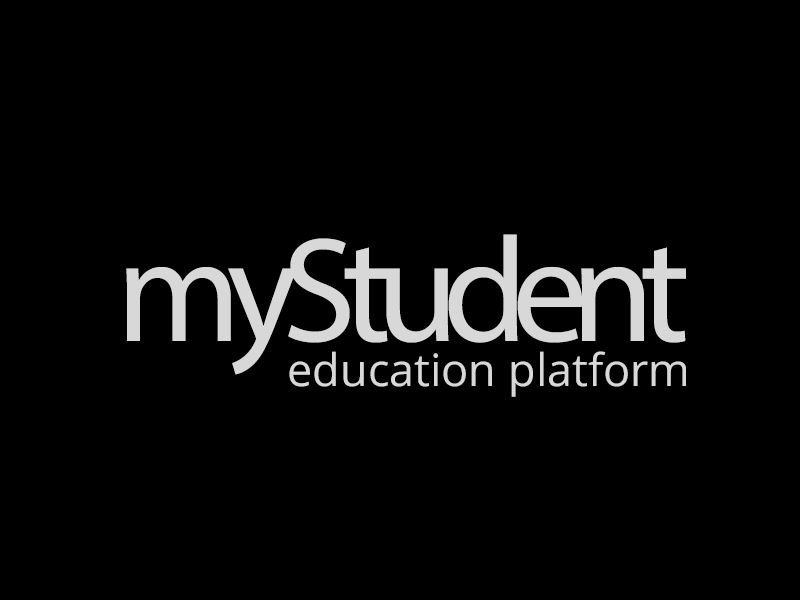
<style>
.page{position:relative;width:800px;height:600px;background:#000000}
.page>*{position:absolute;margin:0}
.t1{font:150px "MyriadPro-Regular";letter-spacing:-0.102em;color:#d8d8d8}
.t2{font:45px "OpenSans";color:#d8d8d8}
</style>
<div class="page">
<p class="t1" style="left:126px;top:234px;width:560px;height:141px">myStudent</p>
<p class="t2" style="left:289px;top:351px;width:397px;height:46px">education platform</p>
</div>
